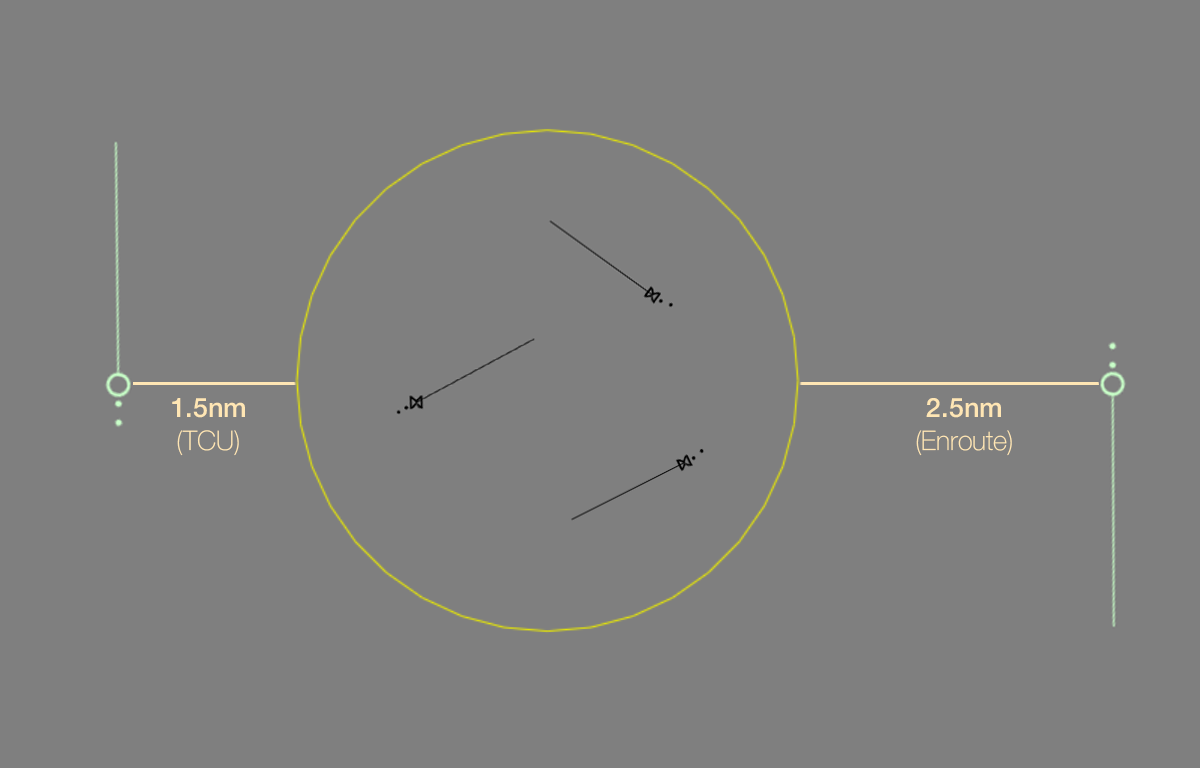
<style>
.page{position:relative;width:1200px;height:768px;background:#7f7f7f}
.page>*{position:absolute;margin:0}
.t1{font:27px "HelveticaNeue-Medium";color:#ffe6b4}
.t2{font:27px "HelveticaNeue-Thin";color:#ffe6b4}
</style>
<div class="page">
<p class="t1" style="left:172px;top:398px;width:73px;height:58px;text-align:center">1.5nm<br><span class="t2">(TCU)</span></p>
<p class="t2" style="left:916px;top:398px;width:96px;height:58px;text-align:center"><span class="t1">2.5nm<br></span>(Enroute)</p>
</div>
